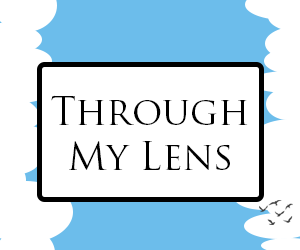
<style>
.page{position:relative;width:300px;height:250px;background:#ffffff}
.page>*{position:absolute;margin:0}
.t1{font:37.5px "TrajanPro-Regular";color:#000000}
</style>
<div class="page">
<p class="t1" style="left:51px;top:95px;width:197px;height:75px;text-align:center">Through My Lens</p>
</div>
